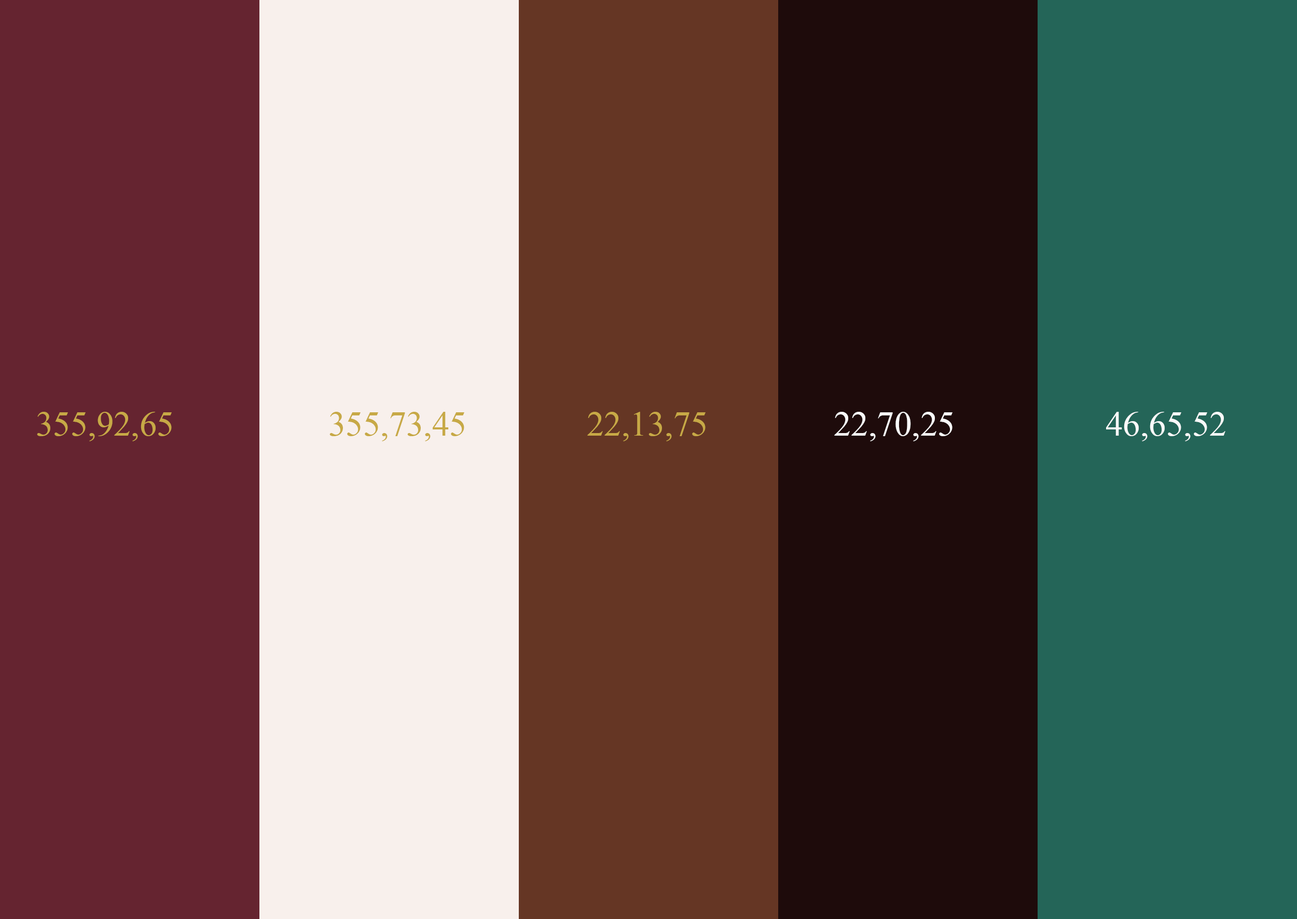
<style>
.page{position:relative;width:1297px;height:919px;background:#246558}
.page>*{position:absolute;margin:0}
.t1{font:34.6px "TimesNewRomanPSMT";color:#c7a946}
.t2{font:34.6px "TimesNewRomanPSMT";color:#f9f9f9}
</style>
<div class="page">
<p class="t1" style="left:37px;top:412px;width:135px;height:30px">355,92,65</p>
<p class="t1" style="left:329px;top:412px;width:135px;height:30px">355,73,45</p>
<p class="t1" style="left:587px;top:412px;width:119px;height:30px">22,13,75</p>
<p class="t2" style="left:834px;top:412px;width:119px;height:30px">22,70,25</p>
<p class="t2" style="left:1106px;top:412px;width:119px;height:30px">46,65,52</p>
</div>
